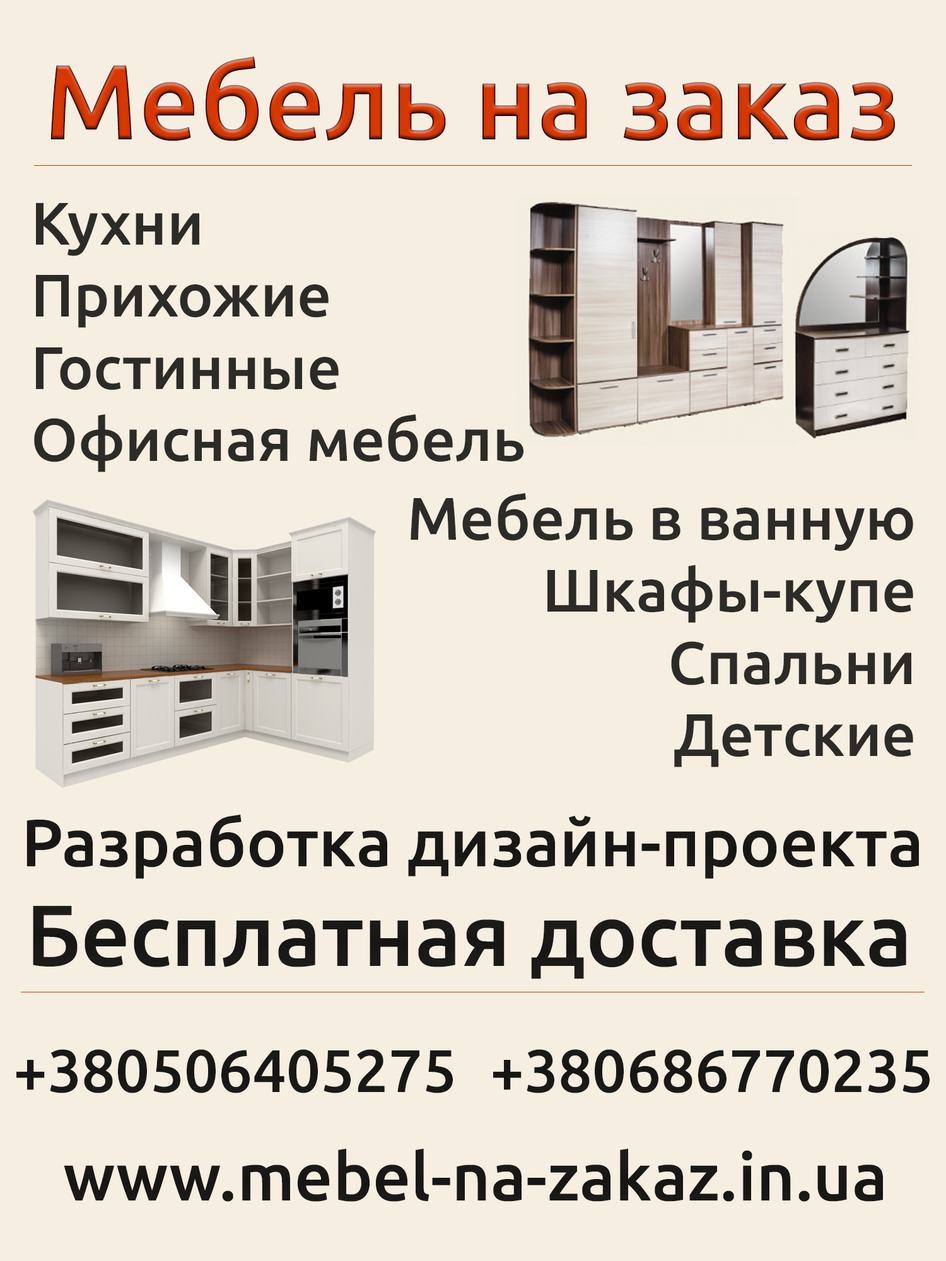
<style>
.page{position:relative;width:946px;height:1261px;background:#f6eee1}
.page>*{position:absolute;margin:0}
.t1{font:106.8px "3974"}
.t2{font:60.1px "3974";color:#2c2b27}
.t3{font:66.7px "3974";color:#2c2b27}
.t4{font:86.7px "3974";color:#2c2b27}
</style>
<div class="page">
<p class="t1" style="left:50px;top:56px;width:845px;height:85px">Мебель на заказ</p>
<p class="t2" style="left:34px;top:203px;width:489px;height:269px">Кухни<br>Прихожие<br>Гостинные<br>Офисная мебель</p>
<p class="t2" style="left:410px;top:493px;width:503px;height:274px;text-align:right">Мебель в ванную<br>Шкафы-купе<br>Спальни<br>Детские</p>
<p class="t3" style="left:26px;top:815px;width:893px;height:64px">Разработка дизайн-проекта</p>
<p class="t4" style="left:33px;top:905px;width:873px;height:74px">Бесплатная доставка</p>
<p class="t2" style="left:16px;top:1049px;width:913px;height:44px">+380506405275  +380686770235</p>
<p class="t3" style="left:64px;top:1149px;width:819px;height:53px">www.mebel-na-zakaz.in.ua</p>
</div>
